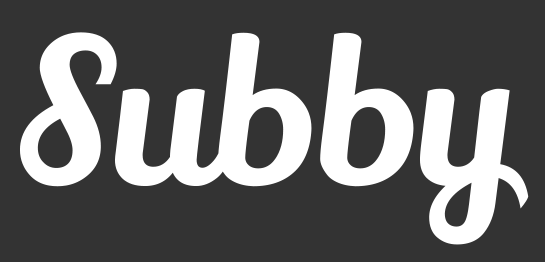
<style>
.page{position:relative;width:545px;height:262px;background:#333333}
.page>*{position:absolute;margin:0}
.t1{font:200px "LilyScriptOne-Regular";color:#ffffff}
</style>
<div class="page">
<p class="t1" style="left:20px;top:32px;width:509px;height:213px">Subby</p>
</div>
